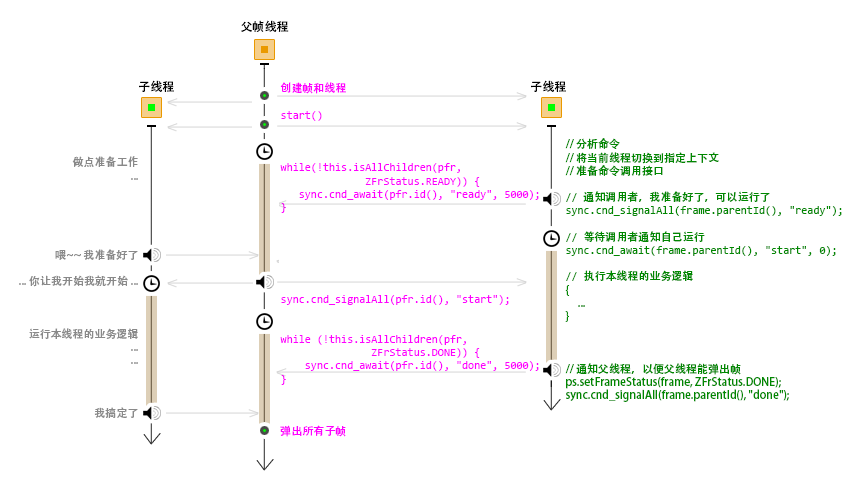
<style>
.page{position:relative;width:864px;height:496px;background:#ffffff}
.page>*{position:absolute;margin:0}
.t1{font:12px "AdobeHeitiStd-Regular";color:#000000}
.t2{font:11px "Consolas";color:#ff00ff}
.t3{font:11px "AdobeHeitiStd-Regular";color:#ff00ff}
.t4{font:11px "AdobeHeitiStd-Regular";color:#008800}
.t5{font:11px "Consolas";color:#008800}
.t6{font:11px "AdobeHeitiStd-Regular";color:#898989}
</style>
<div class="page">
<p class="t1" style="left:241px;top:20px;width:48px;height:12px">父帧线程</p>
<p class="t1" style="left:139px;top:80px;width:35px;height:12px">子线程</p>
<p class="t2" style="left:280px;top:82px;width:259px;height:355px"><span class="t3">创建帧和线程<br></span><br>start()<br><br><br><br>while(!this.isAllChildren(pfr, <br>              ZFrStatus.READY)) {<br>   sync.cnd_await(pfr.id(), "ready", 5000);<br>}<br><br><br><br><br><br><br>sync.cnd_signalAll(pfr.id(), "start");<br><br><br>while (!this.isAllChildren(pfr, <br>               ZFrStatus.DONE)) {<br>    sync.cnd_await(pfr.id(), "done", 5000);<br>}<br><br><br><br><span class="t3">弹出所有子帧</span></p>
<p class="t1" style="left:531px;top:80px;width:35px;height:12px">子线程</p>
<p class="t4" style="left:565px;top:138px;width:277px;height:264px">// 分析命令<br>// 将当前线程切换到指定上下文<br>// 准备命令调用接口<br><span class="t5"><br>// </span>通知调用者，我准备好了，可以运行了<span class="t5"><br>sync.cnd_signalAll(frame.parentId(), "ready");<br><br>// </span>等待调用者通知自己运行<span class="t5"><br>sync.cnd_await(frame.parentId(), "start", 0);<br><br>// </span>执行本线程的业务逻辑<br>{<br>     ...<br>}<br><br><br><br>// 通知父线程，以便父线程能弹出帧<br>ps.setFrameStatus(frame, ZFrStatus.DONE);<br>sync.cnd_signalAll(frame.parentId(), "done");</p>
<p class="t6" style="left:19px;top:156px;width:119px;height:262px;text-align:right">做点准备工作<br>...<br><br><br><br><br><br>喂~~ 我准备好了<br><br>... 你让我开始我就开始 ...<br><br><br><br>运行本线程的业务逻辑<br>...<br>...<br><br><br><br>我搞定了</p>
</div>
